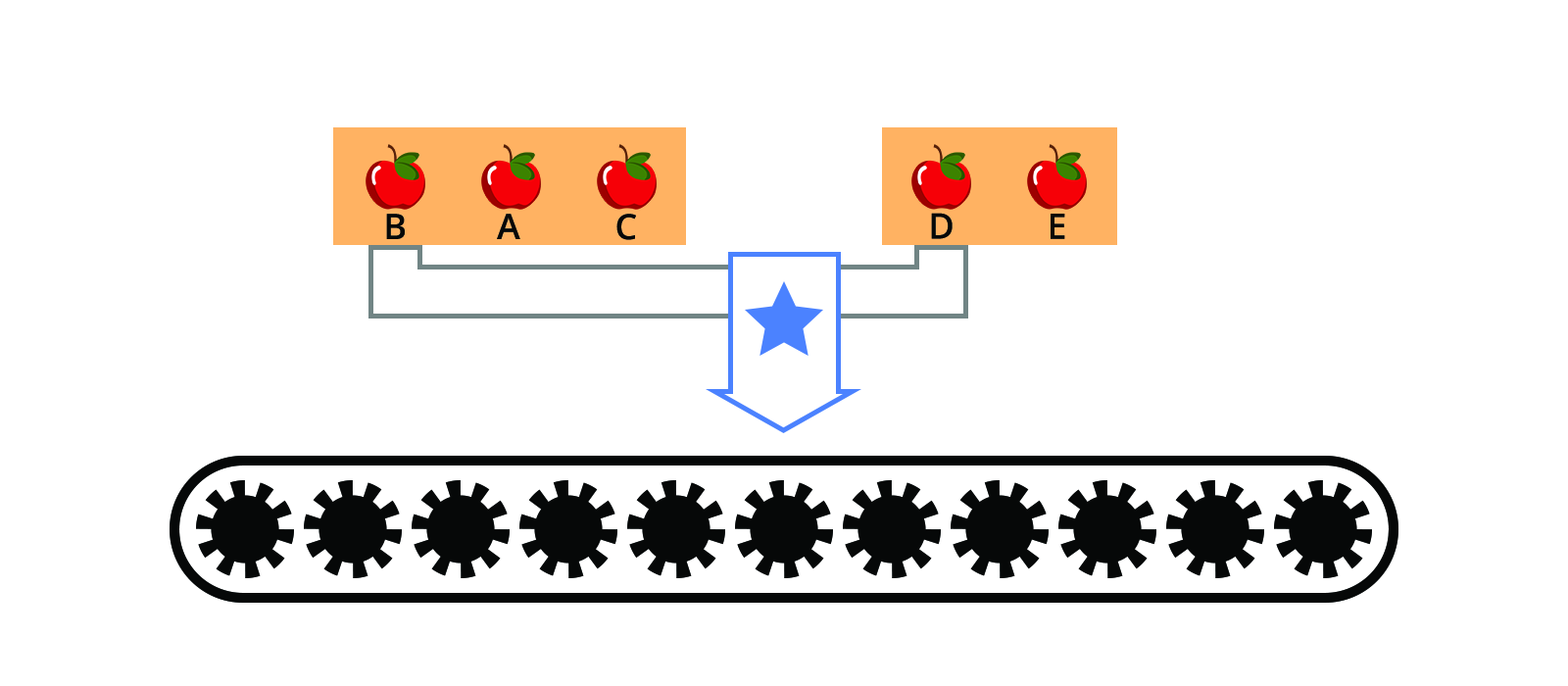
<style>
.page{position:relative;width:1568px;height:686px;background:#ffffff}
.page>*{position:absolute;margin:0}
.t1{font:35.3px "OpenSans-SemiBold";letter-spacing:0.12em;color:#060808}
</style>
<div class="page">
<p class="t1" style="left:386px;top:214px;width:19px;height:25px">B</p>
<p class="t1" style="left:497px;top:214px;width:23px;height:25px">A</p>
<p class="t1" style="left:616px;top:214px;width:20px;height:26px">C</p>
<p class="t1" style="left:931px;top:213px;width:22px;height:26px">D</p>
<p class="t1" style="left:1051px;top:214px;width:14px;height:25px">E</p>
</div>
